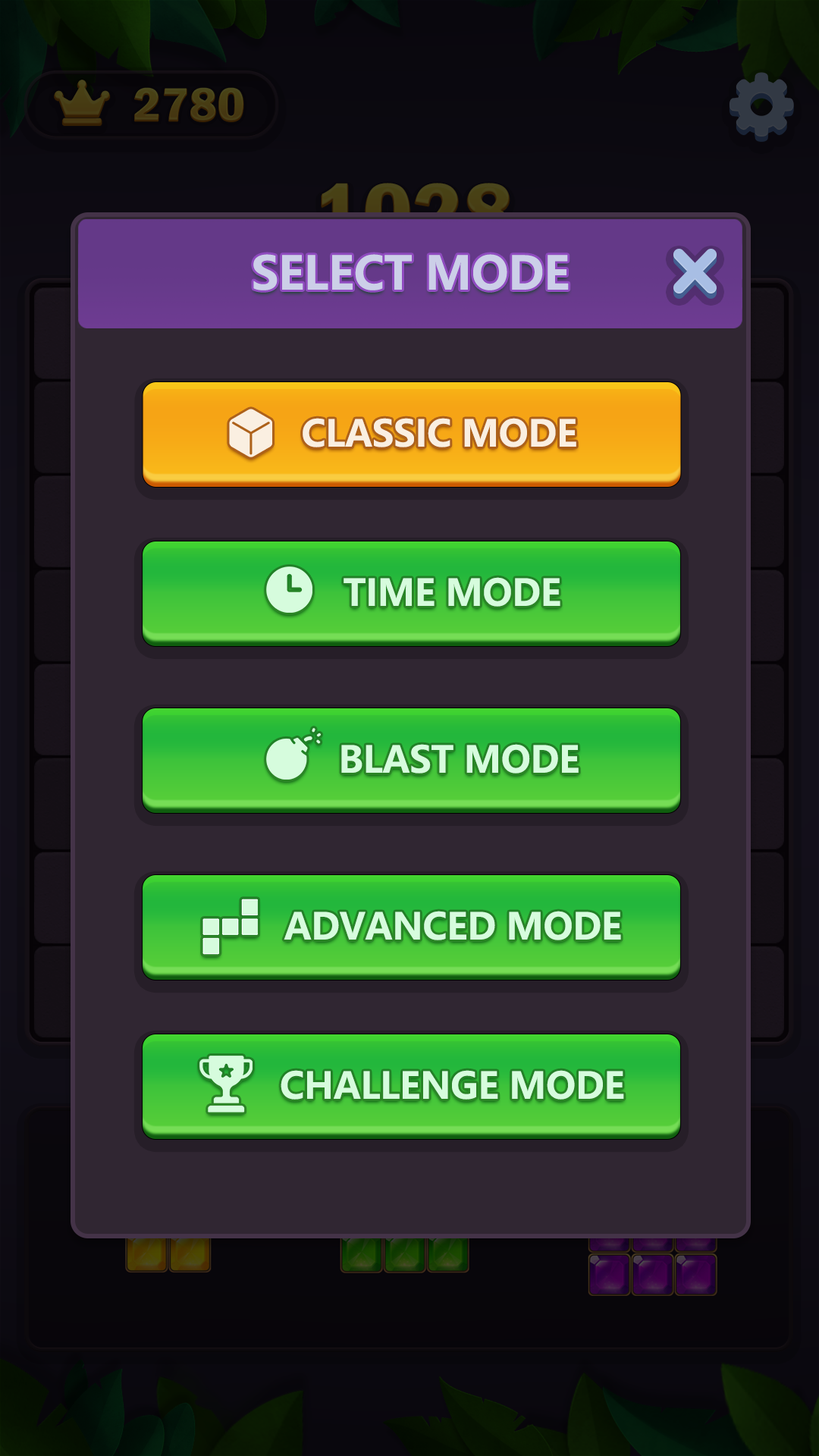
<style>
.page{position:relative;width:819px;height:1456px;background:#302632}
.page>*{position:absolute;margin:0}
.t1{font:45.5px "MicrosoftYaHei-Bold";letter-spacing:-0.01em;color:#cccfe8;text-transform:uppercase}
.t2{font:36.4px "MicrosoftYaHei-Bold";letter-spacing:-0.01em;color:#faefe1}
.t3{font:36.4px "MicrosoftYaHei-Bold";letter-spacing:-0.01em;color:#d6fcdd}
</style>
<div class="page">
<p class="t1" style="left:253px;top:254px;width:316px;height:36px">Select Mode</p>
<p class="t2" style="left:303px;top:418px;width:273px;height:29px">CLASSIC MODE</p>
<p class="t3" style="left:344px;top:577px;width:216px;height:30px">TIME MODE</p>
<p class="t3" style="left:341px;top:744px;width:238px;height:29px">BLAST MODE</p>
<p class="t3" style="left:284px;top:911px;width:337px;height:29px">ADVANCED MODE</p>
<p class="t3" style="left:281px;top:1070px;width:343px;height:30px">CHALLENGE MODE</p>
</div>
